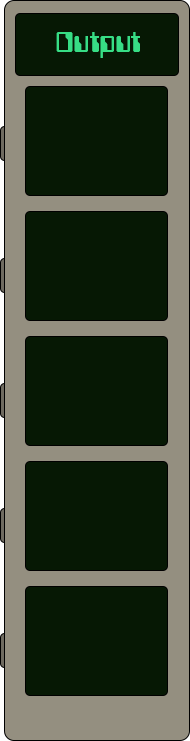
<style>
.page{position:relative;width:190px;height:741px;background:#061804}
.page>*{position:absolute;margin:0}
.t1{font:33.3px "Computerfont";color:#37dd85}
</style>
<div class="page">
<p class="t1" style="left:56px;top:32px;width:84px;height:26px">Output</p>
</div>
